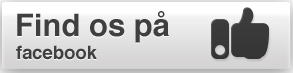
<style>
.page{position:relative;width:293px;height:73px}
.page>*{position:absolute;margin:0}
.t1{font:31px "Helvetica-Bold";color:#3f3f3f}
.t2{font:18.5px "Helvetica-Bold";color:#3f3f3f}
</style>
<div class="page">
<p class="t1" style="left:17px;top:11px;width:152px;height:32px">Find os på</p>
<p class="t2" style="left:16px;top:45px;width:81px;height:15px">facebook</p>
</div>
